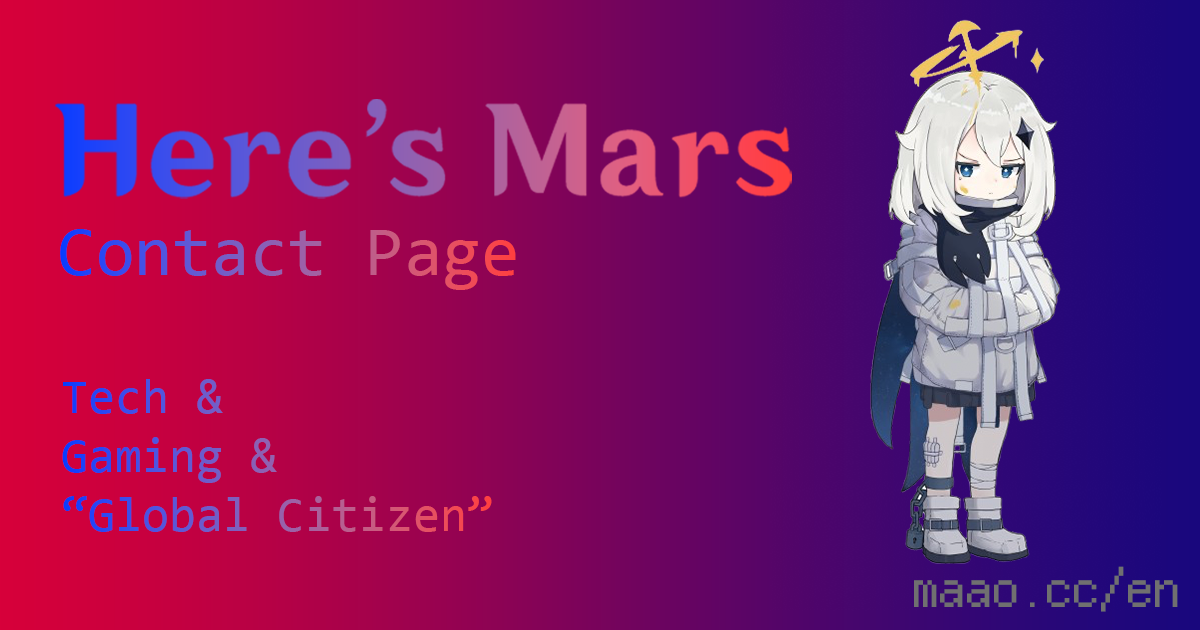
<style>
.page{position:relative;width:1200px;height:630px}
.page>*{position:absolute;margin:0}
.t1{font:70px "Consolas"}
.t2{font:49.3px "Consolas"}
.t3{font:53.5px "ZLabsBitmap_11x12px";color:#707070}
</style>
<div class="page">
<p class="t1" style="left:60px;top:229px;width:456px;height:61px">Contact Page</p>
<p class="t2" style="left:62px;top:379px;width:430px;height:153px">Tech &amp;<br>Gaming &amp;<br>“Global Citizen”</p>
<p class="t3" style="left:914px;top:566px;width:264px;height:46px">maao.cc/en</p>
</div>
